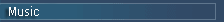
<style>
.page{position:relative;width:224px;height:22px;background:#314965}
.page>*{position:absolute;margin:0}
.t1{font:12.1px "Verdana";color:#ffffff;scale:0.91 1}
</style>
<div class="page">
<p class="t1" style="left:9px;top:6px;width:30px;height:10px">Music</p>
</div>
